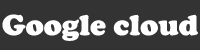
<style>
.page{position:relative;width:200px;height:50px;background:#333333}
.page>*{position:absolute;margin:0}
.t1{font:30px "CooperBlack";color:#fefefe}
</style>
<div class="page">
<p class="t1" style="left:2px;top:14px;width:196px;height:27px">Google cloud</p>
</div>
